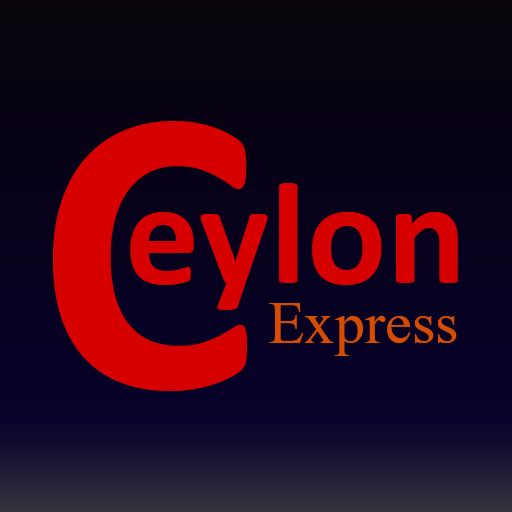
<style>
.page{position:relative;width:512px;height:512px}
.page>*{position:absolute;margin:0}
.t1{font:415.3px "Calibri-Bold";letter-spacing:0.005em;color:#d60000}
.t2{font:148.1px "Calibri-Bold";letter-spacing:0.005em;color:#d60000}
.t3{font:59.8px "TimesNewRomanPSMT";letter-spacing:0.005em;color:#d64c00}
</style>
<div class="page">
<p class="t1" style="left:52px;top:121px;width:195px;height:270px">C</p>
<p class="t2" style="left:130px;top:183px;width:328px;height:127px">eylon</p>
<p class="t3" style="left:269px;top:303px;width:188px;height:53px">Express</p>
</div>
